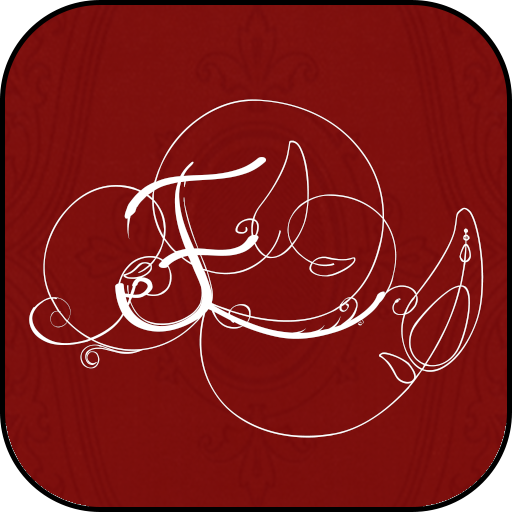
<style>
.page{position:relative;width:512px;height:512px}
.page>*{position:absolute;margin:0}
.t1{font:250px "EternalCall";color:#ffffff}
</style>
<div class="page">
<p class="t1" style="left:29px;top:99px;width:455px;height:339px">F</p>
</div>
